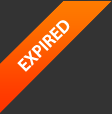
<style>
.page{position:relative;width:112px;height:114px;background:#333333}
.page>*{position:absolute;margin:0}
.t1{font:17.8px "MyriadPro-Semibold";color:#ffffff;text-transform:uppercase}
</style>
<div class="page">
<p class="t1" style="left:17px;top:20px;width:53px;height:52px;rotate:-45deg">EXPIRED</p>
</div>
